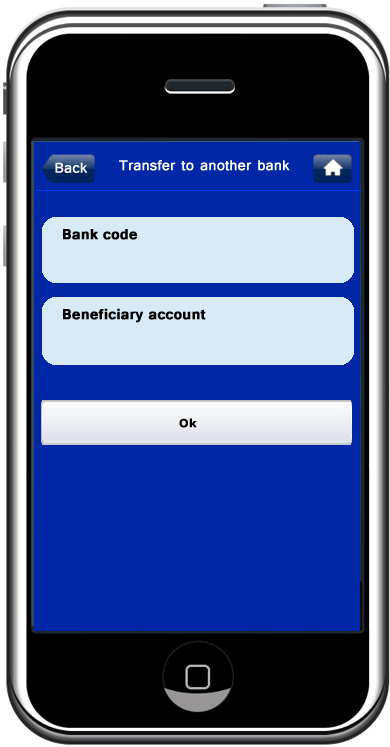
<style>
.page{position:relative;width:390px;height:747px;background:#0027a6}
.page>*{position:absolute;margin:0}
.t1{font:18px "Tunga";color:#ffffff;font-weight:bold}
.t2{font:18px "Tunga-Bold";color:#000000;font-weight:bold}
.t3{font:11px "Verdana-Bold";color:#000000;font-weight:bold}
</style>
<div class="page">
<p class="t1" style="left:119px;top:160px;width:171px;height:11px">Transfer to another bank</p>
<p class="t1" style="left:55px;top:162px;width:33px;height:11px">Back</p>
<p class="t2" style="left:63px;top:229px;width:74px;height:11px">Bank code</p>
<p class="t2" style="left:63px;top:308px;width:143px;height:15px">Beneficiary account</p>
<p class="t3" style="left:179px;top:418px;width:18px;height:10px">Ok</p>
</div>
